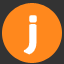
<style>
.page{position:relative;width:64px;height:64px;background:#ff881d}
.page>*{position:absolute;margin:0}
.t1{font:40px "DTLProkyonTMedium";letter-spacing:-0.03em;color:#ffffff;font-weight:bold}
</style>
<div class="page">
<p class="t1" style="left:24px;top:16px;width:12px;height:38px">j</p>
</div>
